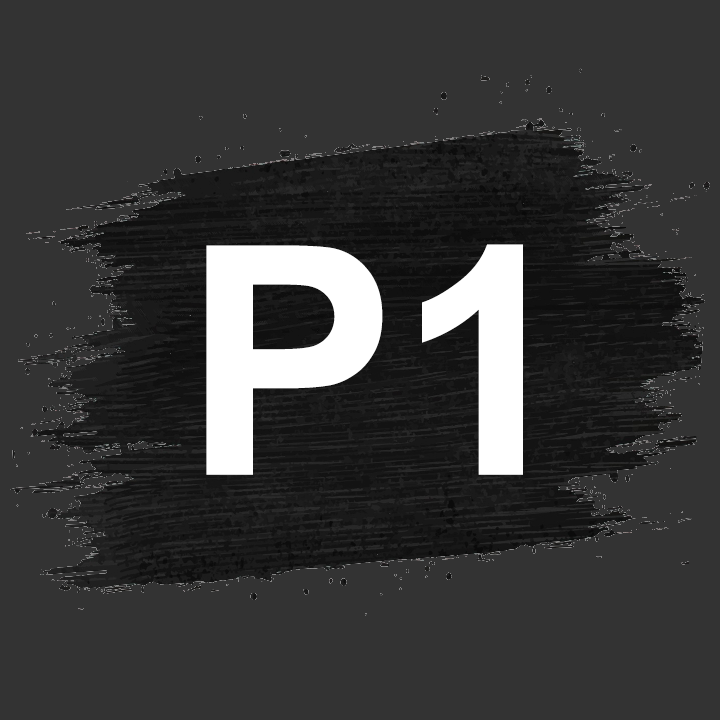
<style>
.page{position:relative;width:720px;height:720px;background:#333333}
.page>*{position:absolute;margin:0}
.t1{font:320px "Arial-BoldMT";color:#ffffff}
</style>
<div class="page">
<p class="t1" style="left:206px;top:244px;width:317px;height:231px">P1</p>
</div>
